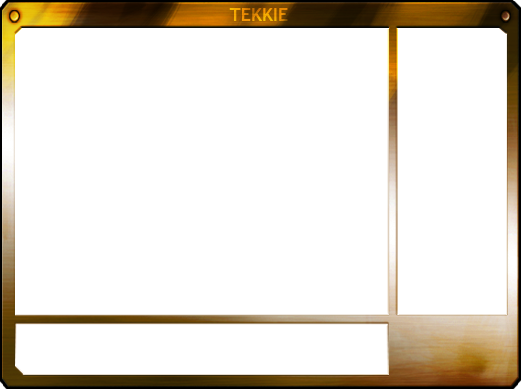
<style>
.page{position:relative;width:521px;height:389px;background:#ffffff}
.page>*{position:absolute;margin:0}
.t1{font:18px "TrebuchetMS-Bold"}
</style>
<div class="page">
<p class="t1" style="left:229px;top:8px;width:59px;height:13px">TEKKIE</p>
</div>
